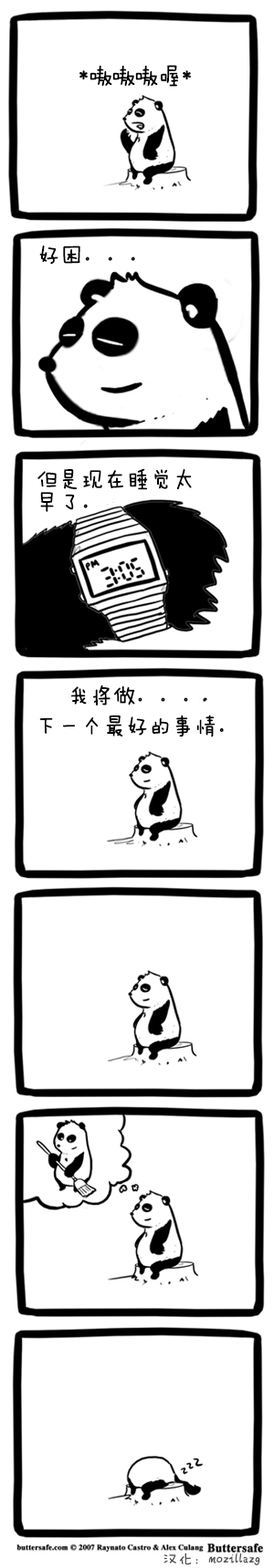
<style>
.page{position:relative;width:274px;height:1568px;background:#ffffff}
.page>*{position:absolute;margin:0}
.t1{font:22.8px "FZMWJW--GB1-0";color:#000000}
.t2{font:22.8px/22.8px "FZMWJW--GB1-0";color:#000000}
.t3{font:22.8px/30.4px "FZMWJW--GB1-0";color:#000000}
.t4{font:15.2px "FZMWJW--GB1-0";color:#525252}
</style>
<div class="page">
<p class="t1" style="left:79px;top:65px;width:112px;height:22px">*嗷嗷嗷喔*</p>
<p class="t1" style="left:39px;top:246px;width:96px;height:19px">好困。。。</p>
<p class="t2" style="left:37px;top:468px;width:155px;height:44px">但是现在睡觉太<br>早了。</p>
<p class="t3" style="left:39px;top:685px;width:185px;height:52px">我将做。。。<br>下一个最好的事情。</p>
<p class="t4" style="left:163px;top:1552px;width:97px;height:13px">汉化：mozillazg</p>
</div>
